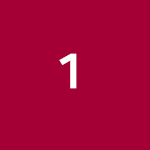
<style>
.page{position:relative;width:150px;height:150px;background:#a40035}
.page>*{position:absolute;margin:0}
.t1{font:48px "NanumSquareEB";color:#ffffff}
</style>
<div class="page">
<p class="t1" style="left:59px;top:53px;width:18px;height:36px">1</p>
</div>
